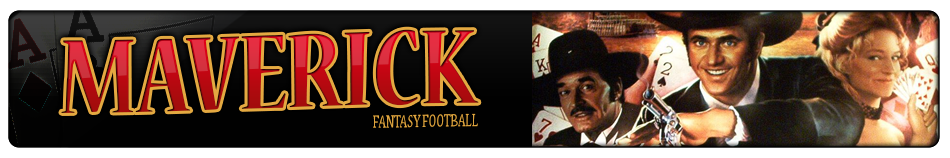
<style>
.page{position:relative;width:950px;height:158px}
.page>*{position:absolute;margin:0}
.t1{font:117.6px "NuevaStd-BoldCond";text-transform:uppercase}
.t2{font:18px "NuevaStd-Cond";color:#e4a941;text-transform:uppercase}
</style>
<div class="page">
<p class="t1" style="left:61px;top:29px;width:418px;height:84px">Maverick</p>
<p class="t2" style="left:373px;top:113px;width:105px;height:15px">Fantasy Football</p>
</div>
